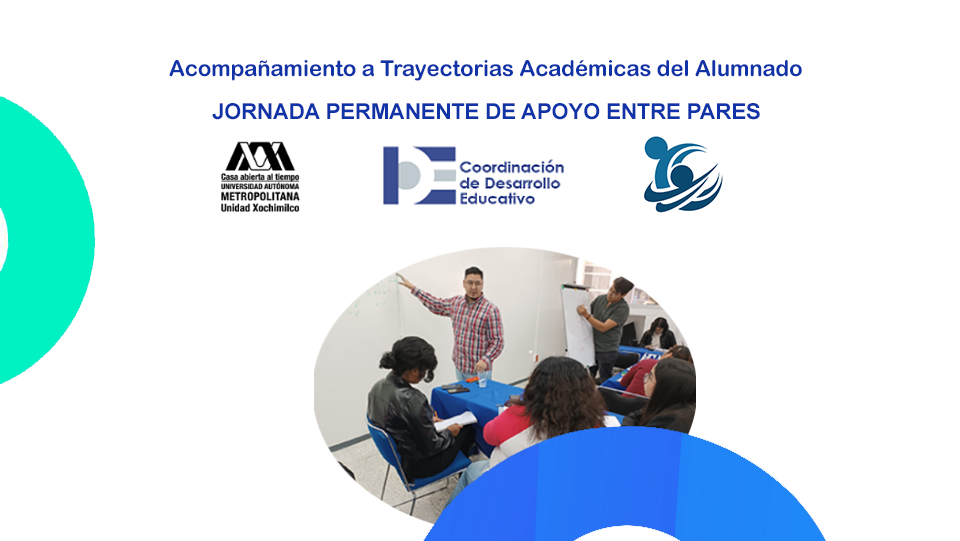
<style>
.page{position:relative;width:960px;height:541px;background:#ffffff}
.page>*{position:absolute;margin:0}
.t1{font:21.9px "ArialRoundedMTBold";color:#1034a7}
.t2{font:21.9px "Arial-BoldMT";color:#1034a7}
</style>
<div class="page">
<p class="t1" style="left:169px;top:60px;width:633px;height:21px">Acompañamiento a Trayectorias Académicas del Alumnado</p>
<p class="t2" style="left:212px;top:103px;width:548px;height:17px">JORNADA PERMANENTE DE APOYO ENTRE PARES</p>
</div>
